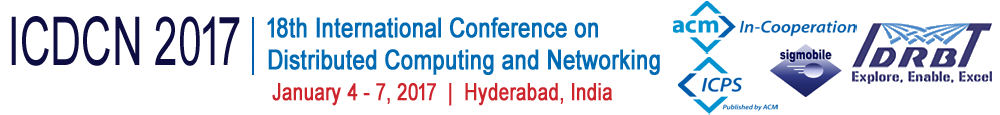
<style>
.page{position:relative;width:1000px;height:115px;background:#ffffff}
.page>*{position:absolute;margin:0}
.t1{font:67.4px "ArialMT";color:#0e0d42;scale:0.63 1}
.t2{font:26.9px "ArialMT";color:#006bb3;font-weight:bold;scale:0.81 1}
.t3{font:23.9px "ArialMT";color:#cd232b;font-weight:bold;scale:0.77 1}
</style>
<div class="page">
<p class="t1" style="left:11px;top:16px;width:229px;height:50px">ICDCN 2017</p>
<p class="t2" style="left:267px;top:17px;width:393px;height:58px">18th International Conference on<br>Distributed Computing and Networking</p>
<p class="t3" style="left:272px;top:83px;width:340px;height:23px">January 4 - 7, 2017  |  Hyderabad, India</p>
</div>
